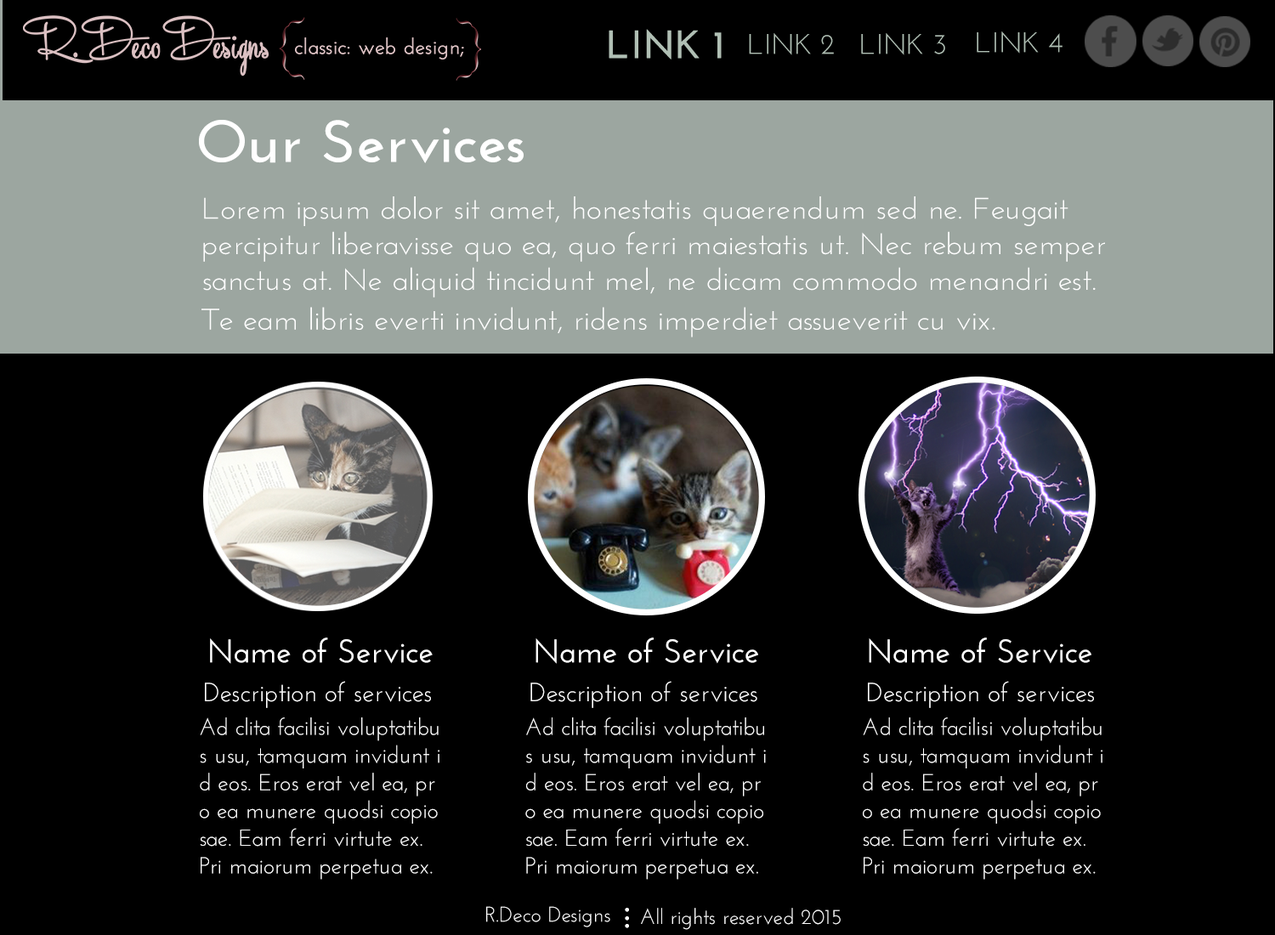
<style>
.page{position:relative;width:1275px;height:935px;background:#000000}
.page>*{position:absolute;margin:0}
.t1{font:28.3px "JosefinSans";color:#b0bfb4}
.t2{font:59.5px "JosefinSans-Bold";color:#ffffff;scale:1.08 1}
.t3{font:29.7px "JosefinSans";color:#ffffff;scale:1.08 1}
.t4{font:33px "JosefinSans-SemiBold";color:#ffffff}
.t5{font:26.4px "JosefinSans";color:#ffffff}
.t6{font:23.1px "JosefinSans";color:#ffffff}
.t7{font:21.3px "JosefinSans";color:#fefefe}
</style>
<div class="page">
<p class="t1" style="left:749px;top:33px;width:85px;height:22px">LINK 2</p>
<p class="t1" style="left:861px;top:33px;width:84px;height:22px">LINK 3</p>
<p class="t1" style="left:977px;top:31px;width:86px;height:23px">LINK 4</p>
<p class="t2" style="left:199px;top:120px;width:325px;height:43px">Our Services</p>
<p class="t3" style="left:201px;top:196px;width:904px;height:141px">Lorem ipsum dolor sit amet, honestatis quaerendum sed ne. Feugait <br>percipitur liberavisse quo ea, quo ferri maiestatis ut. Nec rebum semper <br>sanctus at. Ne aliquid tincidunt mel, ne dicam commodo menandri est. <br>Te eam libris everti invidunt, ridens imperdiet assueverit cu vix.</p>
<p class="t4" style="left:210px;top:638px;width:223px;height:26px">Name of Service</p>
<p class="t4" style="left:536px;top:638px;width:222px;height:26px">Name of Service</p>
<p class="t4" style="left:869px;top:638px;width:223px;height:26px">Name of Service</p>
<p class="t5" style="left:205px;top:681px;width:226px;height:27px">Description of services</p>
<p class="t5" style="left:530px;top:681px;width:227px;height:27px">Description of services</p>
<p class="t5" style="left:868px;top:681px;width:226px;height:27px">Description of services</p>
<p class="t6" style="left:200px;top:717px;width:240px;height:163px">Ad clita facilisi voluptatibu<br>s usu, tamquam invidunt i<br>d eos. Eros erat vel ea, pr<br>o ea munere quodsi copio<br>sae. Eam ferri virtute ex. <br>Pri maiorum perpetua ex.</p>
<p class="t6" style="left:525px;top:717px;width:241px;height:163px">Ad clita facilisi voluptatibu<br>s usu, tamquam invidunt i<br>d eos. Eros erat vel ea, pr<br>o ea munere quodsi copio<br>sae. Eam ferri virtute ex. <br>Pri maiorum perpetua ex.</p>
<p class="t6" style="left:863px;top:717px;width:240px;height:163px">Ad clita facilisi voluptatibu<br>s usu, tamquam invidunt i<br>d eos. Eros erat vel ea, pr<br>o ea munere quodsi copio<br>sae. Eam ferri virtute ex. <br>Pri maiorum perpetua ex.</p>
<p class="t7" style="left:486px;top:906px;width:124px;height:21px">R.Deco Designs</p>
<p class="t7" style="left:625px;top:908px;width:4px;height:4px">•</p>
<p class="t7" style="left:625px;top:916px;width:4px;height:5px">•</p>
<p class="t7" style="left:641px;top:908px;width:200px;height:22px">All rights reserved 2015</p>
<p class="t7" style="left:625px;top:924px;width:4px;height:4px">•</p>
</div>
